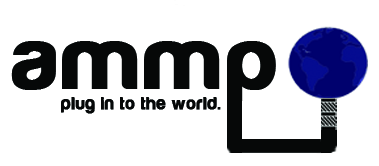
<style>
.page{position:relative;width:379px;height:166px;background:#ffffff}
.page>*{position:absolute;margin:0}
.t1{font:88px "Harabara";letter-spacing:0.04em;color:#060808;font-weight:bold;scale:1.07 1}
.t2{font:18px "Harabara";letter-spacing:0.04em;color:#060808;font-weight:bold}
</style>
<div class="page">
<p class="t1" style="left:11px;top:41px;width:265px;height:65px">ammp</p>
<p class="t2" style="left:61px;top:97px;width:160px;height:17px">plug in to the world.</p>
</div>
